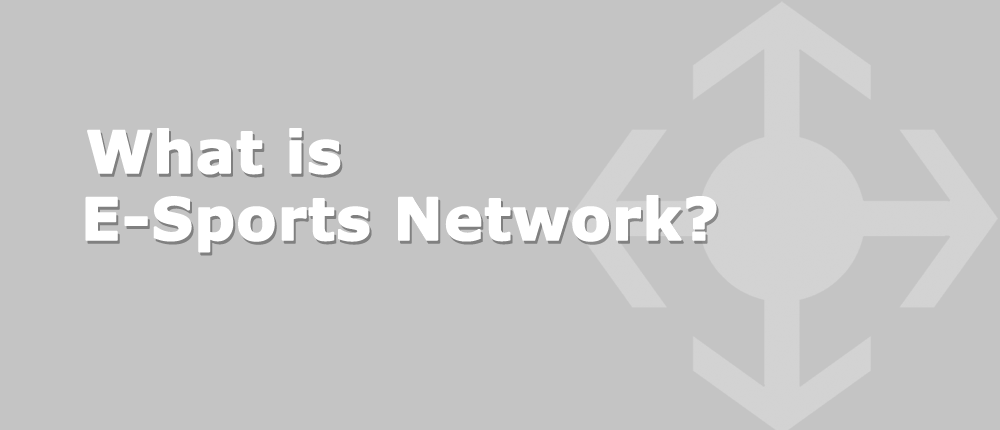
<style>
.page{position:relative;width:1000px;height:430px;background:#c4c4c4}
.page>*{position:absolute;margin:0}
.t1{font:58px "Verdana-Bold";color:#ffffff;font-weight:bold}
</style>
<div class="page">
<p class="t1" style="left:87px;top:128px;width:254px;height:47px">What is</p>
<p class="t1" style="left:85px;top:195px;width:632px;height:58px">E-Sports Network?</p>
</div>
